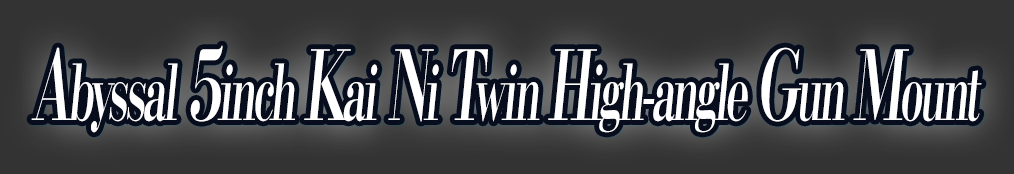
<style>
.page{position:relative;width:1014px;height:174px;background:#333333}
.page>*{position:absolute;margin:0}
.t1{font:76.8px "KochoStd-Heavy";letter-spacing:-0.08em;color:#ffffff;font-style:italic;scale:0.56 1}
.t2{font:96px "KochoStd-Heavy";letter-spacing:-0.08em;color:#ffffff;font-style:italic;scale:0.56 1}
</style>
<div class="page">
<p class="t1" style="left:31px;top:45px;width:951px;height:88px"><span class="t2">A</span>byssal<span class="t2"> 5</span>inch <span class="t2">K</span>ai<span class="t2"> N</span>i <span class="t2">T</span>win <span class="t2">H</span>igh-angle <span class="t2">G</span>un <span class="t2">M</span>ount</p>
</div>
